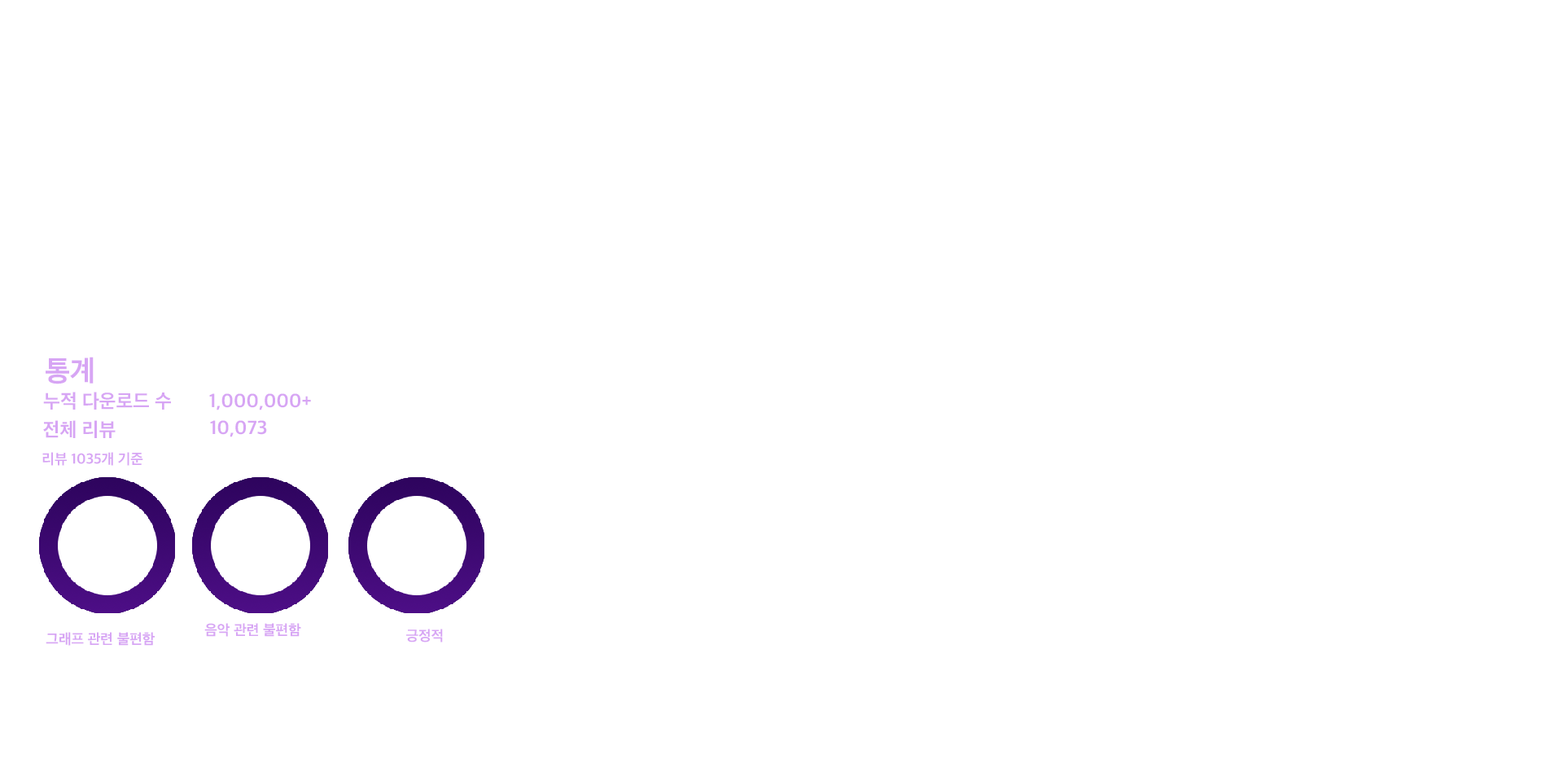
<style>
.page{position:relative;width:1563px;height:763px;background:#ffffff}
.page>*{position:absolute;margin:0}
.t1{font:29.3px "AppleSDGothicNeoB00";color:#d7a5f4}
.t2{font:19.5px "AppleSDGothicNeoB00";color:#d7a5f4}
.t3{font:14.7px "AppleSDGothicNeoB00";color:#d7a5f4}
</style>
<div class="page">
<p class="t1" style="left:46px;top:357px;width:48px;height:27px">통계</p>
<p class="t2" style="left:43px;top:392px;width:128px;height:18px">누적 다운로드 수</p>
<p class="t2" style="left:209px;top:393px;width:102px;height:17px">1,000,000+</p>
<p class="t2" style="left:43px;top:420px;width:73px;height:18px">전체 리뷰</p>
<p class="t2" style="left:210px;top:420px;width:57px;height:17px">10,073</p>
<p class="t3" style="left:42px;top:452px;width:101px;height:14px">리뷰 1035개 기준</p>
<p class="t3" style="left:204px;top:623px;width:97px;height:14px">음악 관련 불편함</p>
<p class="t3" style="left:406px;top:629px;width:37px;height:13px">긍정적</p>
<p class="t3" style="left:46px;top:632px;width:109px;height:14px">그래프 관련 불편함</p>
</div>
